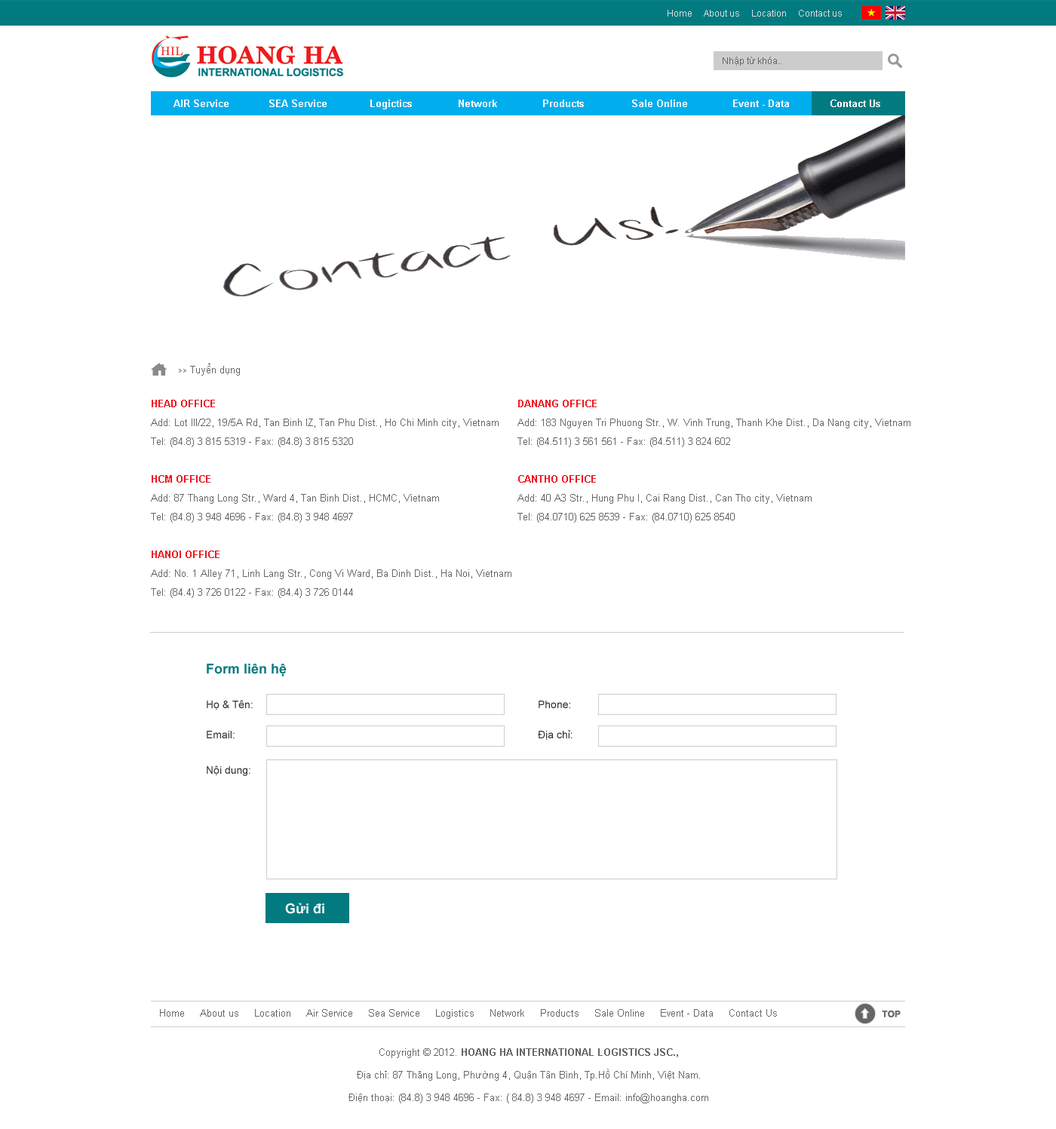
<style>
.page{position:relative;width:1056px;height:1129px;background:#ffffff}
.page>*{position:absolute;margin:0}
.t1{font:9.1px "ArialMT";color:#dddddd}
.t2{font:9.1px "ArialMT";color:#666666}
.t3{font:9.8px "Arial-BoldMT";color:#ffffff}
.t4{font:9.8px "ArialMT";color:#666666}
.t5{font:7.5px "ArialMT";color:#666666}
.t6{font:9.8px/16.6px "ArialMT";color:#666666}
.t7{font:9.8px/16.6px "Arial-BoldMT";color:#ed1721}
.t8{font:13.6px "Arial-BoldMT";color:#017b80}
.t9{font:10.6px/15.1px "ArialMT";color:#333333}
.t10{font:10.6px "ArialMT";color:#333333}
.t11{font:13.6px "Arial-BoldMT";color:#ffffff}
.t12{font:9.8px/15.1px "ArialMT";color:#666666}
.t13{font:9.8px/15.1px "Arial-BoldMT";color:#666666}
</style>
<div class="page">
<p class="t1" style="left:668px;top:10px;width:174px;height:7px">Home     About us     Location     Contact us</p>
<p class="t2" style="left:723px;top:57px;width:58px;height:9px">Nhập từ khóa..</p>
<p class="t3" style="left:173px;top:100px;width:56px;height:7px">AIR Service</p>
<p class="t3" style="left:269px;top:100px;width:58px;height:7px">SEA Service</p>
<p class="t3" style="left:370px;top:100px;width:42px;height:9px">Logictics</p>
<p class="t3" style="left:459px;top:100px;width:38px;height:7px">Network</p>
<p class="t3" style="left:543px;top:100px;width:41px;height:7px">Products</p>
<p class="t3" style="left:632px;top:100px;width:55px;height:7px">Sale Online</p>
<p class="t3" style="left:733px;top:100px;width:56px;height:7px">Event - Data</p>
<p class="t3" style="left:830px;top:100px;width:50px;height:7px">Contact Us</p>
<p class="t4" style="left:179px;top:364px;width:61px;height:12px"><span class="t5">&gt;&gt;</span> Tuyển dụng</p>
<p class="t6" style="left:151px;top:400px;width:360px;height:198px"><span class="t7">HEAD OFFICE<br></span>Add: Lot III/22, 19/5A Rd, Tan Binh IZ, Tan Phu Dist., Ho Chi Minh city, Vietnam<br>Tel: (84.8) 3 815 5319 - Fax: (84.8) 3 815 5320<br><br><span class="t7">HCM OFFICE<br></span>Add: 87 Thang Long Str., Ward 4, Tan Binh Dist., HCMC, Vietnam<br>Tel: (84.8) 3 948 4696 - Fax: (84.8) 3 948 4697<br><br><span class="t7">HANOI OFFICE<br></span>Add: No. 1 Alley 71, Linh Lang Str., Cong Vi Ward, Ba Dinh Dist., Ha Noi, Vietnam<br>Tel: (84.4) 3 726 0122 - Fax: (84.4) 3 726 0144</p>
<p class="t6" style="left:517px;top:400px;width:393px;height:123px"><span class="t7">DANANG OFFICE<br></span>Add: 183 Nguyen Tri Phuong Str., W. Vinh Trung, Thanh Khe Dist., Da Nang city, Vietnam<br>Tel: (84.511) 3 561 561 - Fax: (84.511) 3 824 602<br><br><span class="t7">CANTHO OFFICE<br></span>Add: 40 A3 Str., Hung Phu I, Cai Rang Dist., Can Tho city, Vietnam<br>Tel: (84.0710) 625 8539 - Fax: (84.0710) 625 8540</p>
<p class="t8" style="left:207px;top:664px;width:80px;height:13px">Form liên hệ</p>
<p class="t9" style="left:207px;top:700px;width:46px;height:38px">Họ &amp; Tên:<br>Email:</p>
<p class="t9" style="left:538px;top:701px;width:35px;height:39px">Phone:<br>Địa chỉ:</p>
<p class="t10" style="left:207px;top:766px;width:43px;height:10px">Nội dung:</p>
<p class="t11" style="left:285px;top:903px;width:39px;height:11px">Gửi đi</p>
<p class="t4" style="left:160px;top:1009px;width:617px;height:10px">Home     About us     Location     Air Service     Sea Service     Logistics     Network     Products     Sale Online     Event - Data     Contact Us</p>
<p class="t12" style="left:348px;top:1048px;width:360px;height:56px;text-align:center">Copyright © 2012. <span class="t13">HOANG HA INTERNATIONAL LOGISTICS JSC.,<br></span>Địa chỉ: 87 Thăng Long, Phường 4, Quận Tân Bình, Tp.Hồ Chí Minh, Việt Nam.<br>Điện thoại: (84.8) 3 948 4696 - Fax: ( 84.8) 3 948 4697 - Email: info@hoangha.com</p>
</div>
